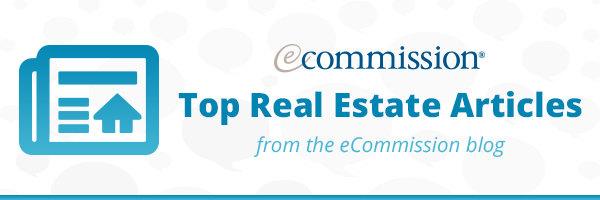
<style>
.page{position:relative;width:600px;height:200px;background:#ffffff}
.page>*{position:absolute;margin:0}
.t1{font:33.4px "OpenSans-Extrabold";color:#0085b2}
.t2{font:20.5px "OpenSans-Italic";color:#46b7d5}
</style>
<div class="page">
<p class="t1" style="left:178px;top:91px;width:404px;height:34px">Top Real Estate Articles</p>
<p class="t1" style="left:178px;top:91px;width:404px;height:34px">Top Real Estate Articles</p>
<p class="t2" style="left:254px;top:136px;width:252px;height:22px">from the eCommission blog</p>
<p class="t2" style="left:254px;top:136px;width:252px;height:22px">from the eCommission blog</p>
</div>
